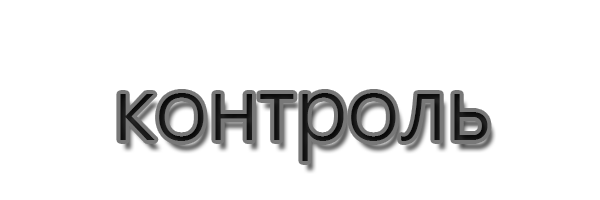
<style>
.page{position:relative;width:600px;height:200px;background:#ffffff}
.page>*{position:absolute;margin:0}
.t1{font:90px "MalgunGothic-Semilight";color:#131313}
</style>
<div class="page">
<p class="t1" style="left:120px;top:93px;width:368px;height:68px">контроль</p>
</div>
